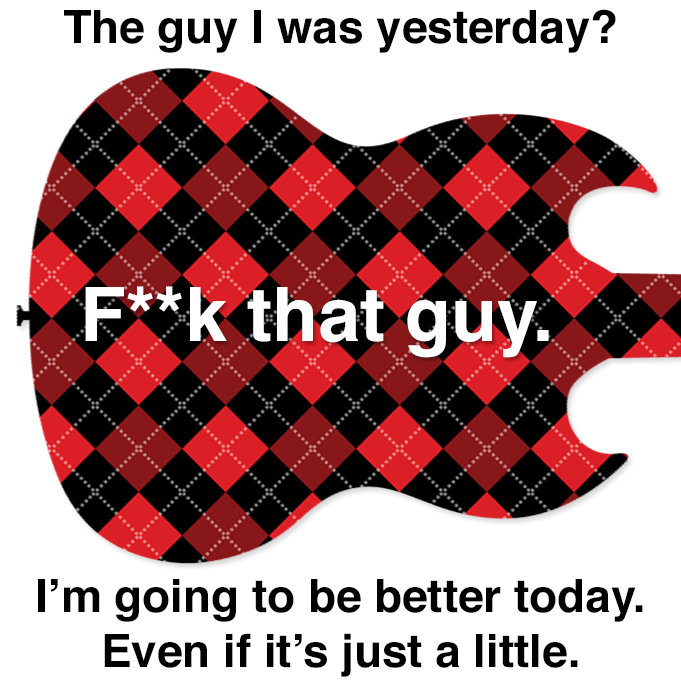
<style>
.page{position:relative;width:681px;height:681px;background:#ffffff}
.page>*{position:absolute;margin:0}
.t1{font:45.8px "Helvetica-Bold";color:#000000}
.t2{font:75px "Helvetica-Bold";color:#ffffff}
</style>
<div class="page">
<p class="t1" style="left:64px;top:9px;width:552px;height:44px">The guy I was yesterday?</p>
<p class="t2" style="left:85px;top:286px;width:464px;height:72px">F**k that guy.</p>
<p class="t1" style="left:38px;top:579px;width:605px;height:98px;text-align:center">I’m going to be better today.<br>Even if it’s just a little.</p>
</div>
